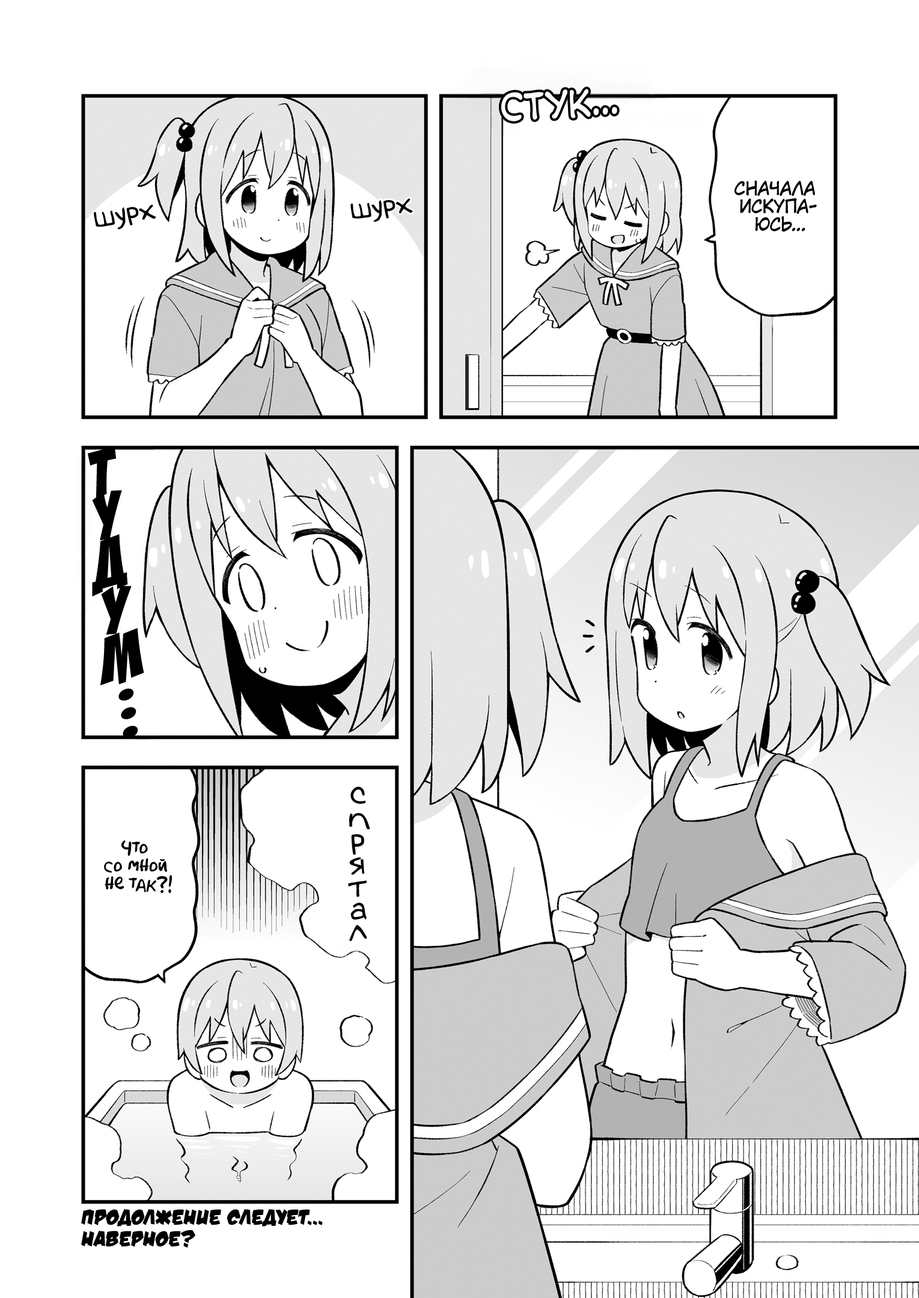
<style>
.page{position:relative;width:919px;height:1298px;background:#ffffff}
.page>*{position:absolute;margin:0}
.t1{font:36.1px "v_CCMonologous";color:#fefefe;text-transform:uppercase}
.t2{font:18px "KuraiVoice2";color:#000000;text-transform:uppercase}
.t3{font:28.8px "v_Augie";color:#000000}
.t4{font:72.1px "BadaBoom";color:#000000}
.t5{font:32.4px "v_Augie";color:#000000}
.t6{font:18px "AkbarPlain";color:#000000}
.t7{font:21.6px "v_DamnNoisyKids";color:#000000;text-transform:uppercase}
</style>
<div class="page">
<p class="t1" style="left:501px;top:89px;width:116px;height:32px;rotate:-4deg">стук...</p>
<p class="t2" style="left:734px;top:180px;width:83px;height:52px;text-align:center">Сначала<br>искупа-<br>юсь...</p>
<p class="t3" style="left:94px;top:204px;width:62px;height:26px;rotate:-8deg">шурх</p>
<p class="t3" style="left:350px;top:198px;width:63px;height:24px;rotate:-5deg">шурх</p>
<p class="t4" style="left:88px;top:446px;width:28px;height:53px;rotate:-8deg">т</p>
<p class="t4" style="left:92px;top:490px;width:30px;height:50px;rotate:-13deg">у</p>
<p class="t4" style="left:92px;top:534px;width:36px;height:63px;rotate:-11deg">д</p>
<p class="t4" style="left:101px;top:586px;width:31px;height:49px;rotate:-9deg">у</p>
<p class="t4" style="left:100px;top:628px;width:44px;height:58px;rotate:-11deg">м</p>
<p class="t4" style="left:118px;top:688px;width:16px;height:13px">.</p>
<p class="t4" style="left:121px;top:707px;width:15px;height:12px">.</p>
<p class="t4" style="left:123px;top:725px;width:15px;height:13px">.</p>
<p class="t5" style="left:350px;top:787px;width:16px;height:17px">с</p>
<p class="t5" style="left:349px;top:813px;width:21px;height:16px">п</p>
<p class="t6" style="left:104px;top:840px;width:68px;height:54px;text-align:center">Что<br>со мной<br>не так?!</p>
<p class="t5" style="left:351px;top:834px;width:13px;height:21px">р</p>
<p class="t5" style="left:349px;top:857px;width:16px;height:18px">я</p>
<p class="t5" style="left:348px;top:880px;width:19px;height:17px">т</p>
<p class="t5" style="left:350px;top:903px;width:17px;height:17px">а</p>
<p class="t5" style="left:349px;top:925px;width:18px;height:16px">л</p>
<p class="t7" style="left:81px;top:1208px;width:242px;height:40px">Продолжение следует...<br>наверное?</p>
</div>
